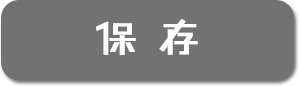
<style>
.page{position:relative;width:299px;height:86px;background:#727272}
.page>*{position:absolute;margin:0}
.t1{font:44.8px "FZJHJW--GB1-0";letter-spacing:0.38em;color:#ffffff;font-weight:bold}
</style>
<div class="page">
<p class="t1" style="left:96px;top:19px;width:102px;height:36px">保存</p>
</div>
